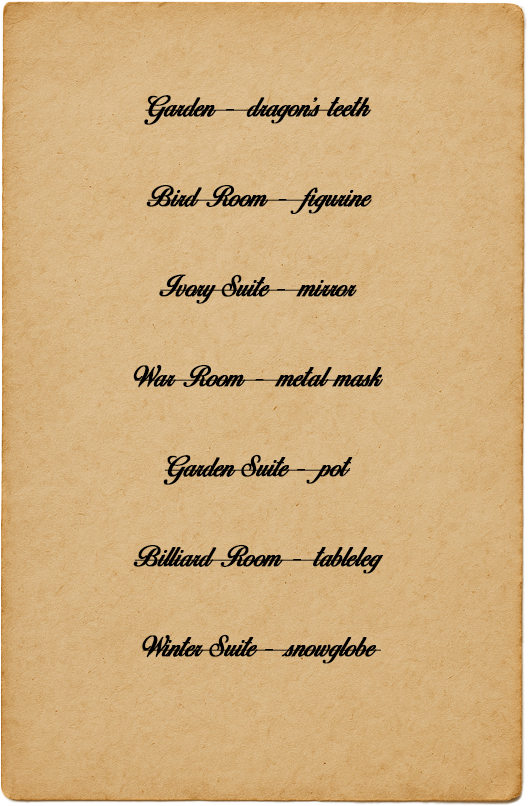
<style>
.page{position:relative;width:528px;height:806px}
.page>*{position:absolute;margin:0}
.t1{font:25px "BirdsofParadise-PersonaluseOnly";color:#000000;font-weight:bold}
</style>
<div class="page">
<p class="t1" style="left:133px;top:95px;width:250px;height:569px;text-align:center">Garden - dragon’s teeth<br><br><br>Bird Room - figurine<br><br><br>Ivory Suite - mirror<br><br><br>War Room - metal mask<br><br><br>Garden Suite - pot<br><br><br>Billiard Room - tableleg<br><br><br>Winter Suite - snowglobe</p>
</div>
